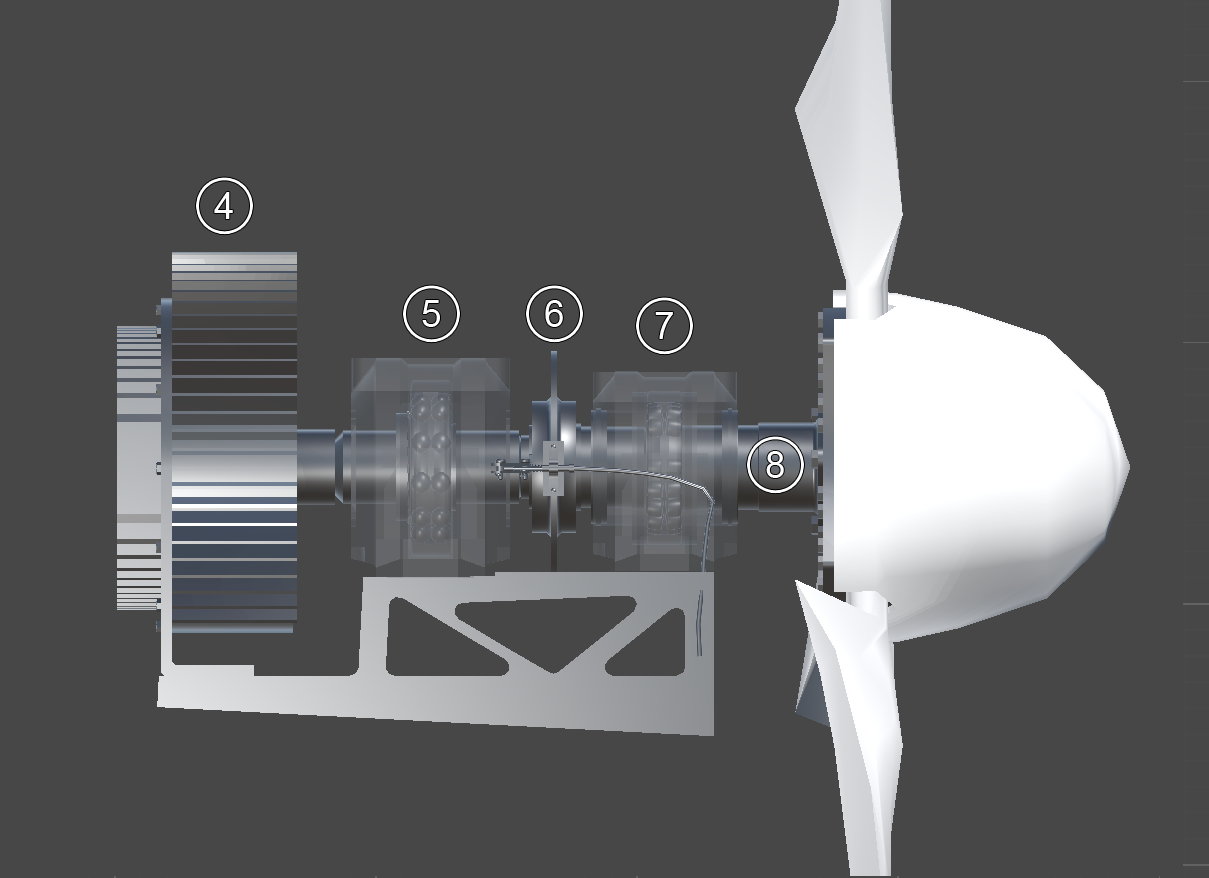
<style>
.page{position:relative;width:1209px;height:878px;background:#474747}
.page>*{position:absolute;margin:0}
.t1{font:36.7px "ArialMT";color:#ffffff}
</style>
<div class="page">
<p class="t1" style="left:214px;top:192px;width:19px;height:27px">4</p>
<p class="t1" style="left:422px;top:300px;width:18px;height:27px">5</p>
<p class="t1" style="left:545px;top:300px;width:18px;height:27px">6</p>
<p class="t1" style="left:655px;top:312px;width:18px;height:27px">7</p>
<p class="t1" style="left:766px;top:451px;width:18px;height:27px">8</p>
</div>
